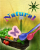
<style>
.page{position:relative;width:40px;height:50px}
.page>*{position:absolute;margin:0}
.t1{font:7px "TimesNewRomanPS-BoldMT"}
</style>
<div class="page">
<p class="t1" style="left:3px;top:11px;width:33px;height:11px;rotate:-2deg">Natural</p>
</div>
